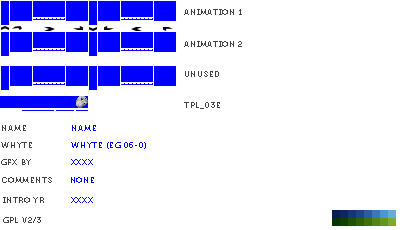
<style>
.page{position:relative;width:400px;height:230px;background:#ffffff}
.page>*{position:absolute;margin:0}
.t1{font:8px "Museo700-Regular";letter-spacing:0.075em;color:#404040;text-transform:uppercase}
.t2{font:8px "Museo700-Regular";letter-spacing:0.075em;color:#0000ff;text-transform:uppercase}
</style>
<div class="page">
<p class="t1" style="left:184px;top:9px;width:58px;height:6px">Animation 1</p>
<p class="t1" style="left:184px;top:41px;width:58px;height:6px">Animation 2</p>
<p class="t1" style="left:185px;top:71px;width:34px;height:6px">unused</p>
<p class="t1" style="left:184px;top:102px;width:36px;height:7px">tpl_03e</p>
<p class="t1" style="left:2px;top:125px;width:24px;height:6px">name</p>
<p class="t2" style="left:72px;top:125px;width:24px;height:6px">name</p>
<p class="t1" style="left:1px;top:142px;width:31px;height:6px">whyte</p>
<p class="t2" style="left:71px;top:142px;width:75px;height:7px">whyte (eg 06-0)</p>
<p class="t1" style="left:1px;top:159px;width:30px;height:6px">gfx by</p>
<p class="t2" style="left:71px;top:159px;width:22px;height:6px">xxxx</p>
<p class="t1" style="left:2px;top:177px;width:50px;height:6px">comments</p>
<p class="t2" style="left:71px;top:177px;width:23px;height:6px">none</p>
<p class="t1" style="left:3px;top:197px;width:41px;height:6px">intro yr</p>
<p class="t2" style="left:71px;top:197px;width:22px;height:6px">xxxx</p>
<p class="t1" style="left:3px;top:217px;width:38px;height:6px">gpl v2/3</p>
</div>
